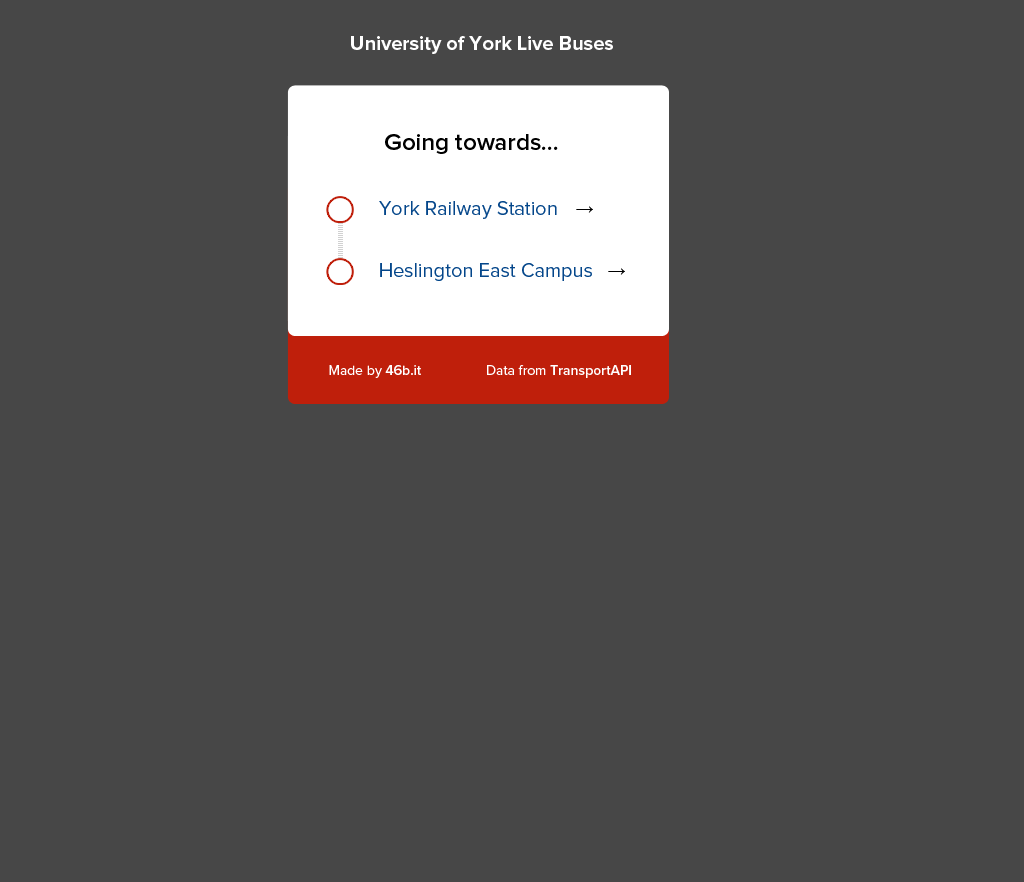
<style>
.page{position:relative;width:1024px;height:882px;background:#474747}
.page>*{position:absolute;margin:0}
.t1{font:20px "ProximaNova-Bold";color:#ffffff}
.t2{font:24px "ProximaNova-Semibold";color:#000000}
.t3{font:20px "ProximaNova-Regular";color:#04468a}
.t4{font:18px "ArialMT";color:#000000}
.t5{font:14px "ProximaNova-Regular";color:#ffffff}
.t6{font:14px "ProximaNova-Semibold";color:#ffffff}
</style>
<div class="page">
<p class="t1" style="left:351px;top:36px;width:262px;height:18px">University of York Live Buses</p>
<p class="t2" style="left:385px;top:134px;width:173px;height:20px">Going towards…</p>
<p class="t3" style="left:379px;top:201px;width:178px;height:18px">York Railway Station</p>
<p class="t4" style="left:576px;top:206px;width:17px;height:7px">→</p>
<p class="t3" style="left:380px;top:263px;width:212px;height:18px">Heslington East Campus</p>
<p class="t4" style="left:608px;top:268px;width:17px;height:7px">→</p>
<p class="t5" style="left:329px;top:365px;width:92px;height:13px">Made by <span class="t6">46b.it</span></p>
<p class="t6" style="left:487px;top:365px;width:144px;height:13px"><span class="t5">Data from </span>TransportAPI</p>
</div>
